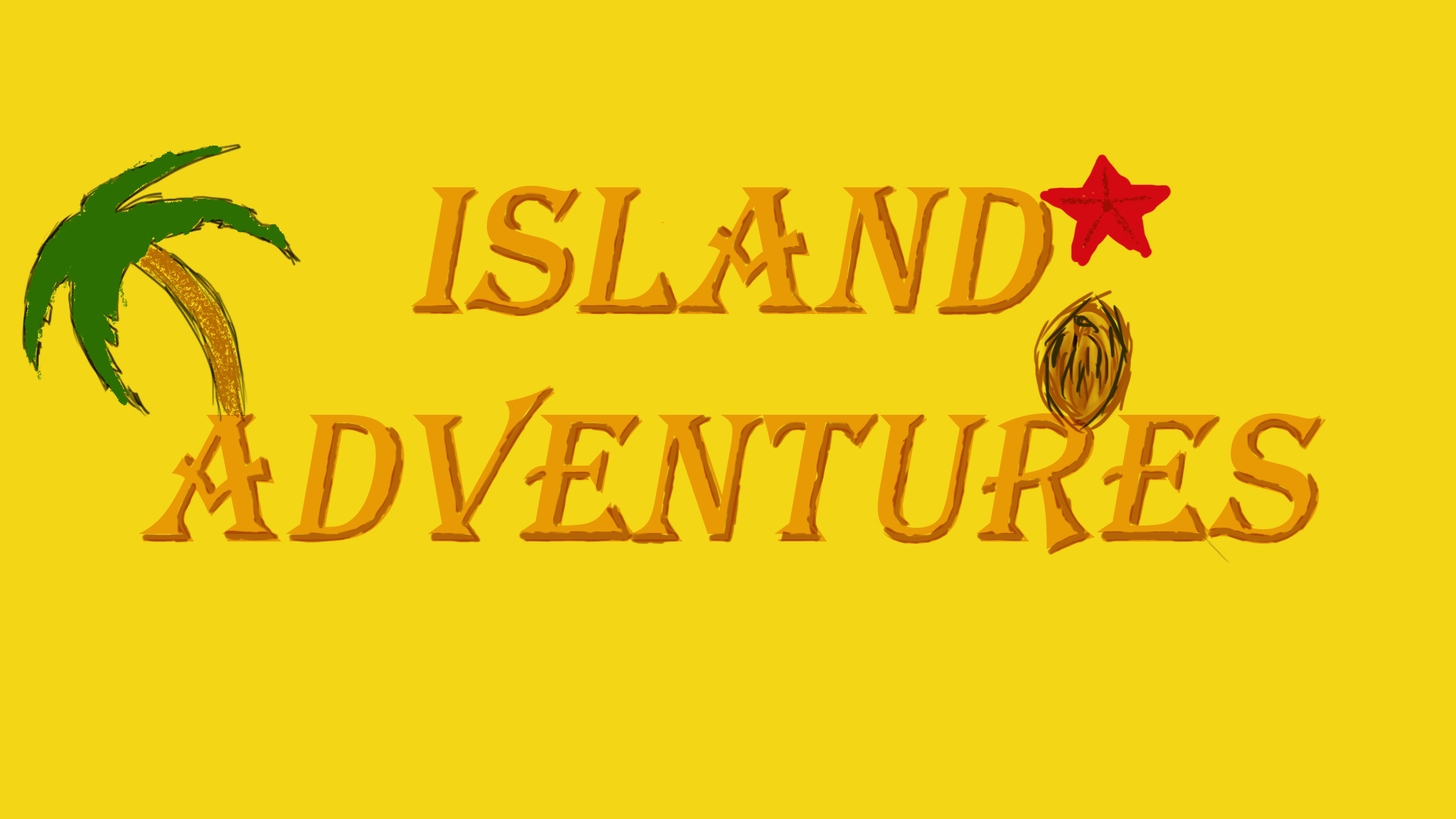
<style>
.page{position:relative;width:1456px;height:819px;background:#f3d616}
.page>*{position:absolute;margin:0}
.t1{font:189.6px "Algerian";color:#e89a05;font-style:italic}
</style>
<div class="page">
<p class="t1" style="left:138px;top:186px;width:1188px;height:369px;text-align:center">ISLAND<br>Adventures</p>
</div>
